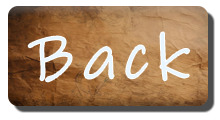
<style>
.page{position:relative;width:220px;height:120px}
.page>*{position:absolute;margin:0}
.t1{font:64px "InkFree";letter-spacing:0.13em;color:#e9f5ff}
</style>
<div class="page">
<p class="t1" style="left:28px;top:32px;width:162px;height:50px">Back</p>
</div>
